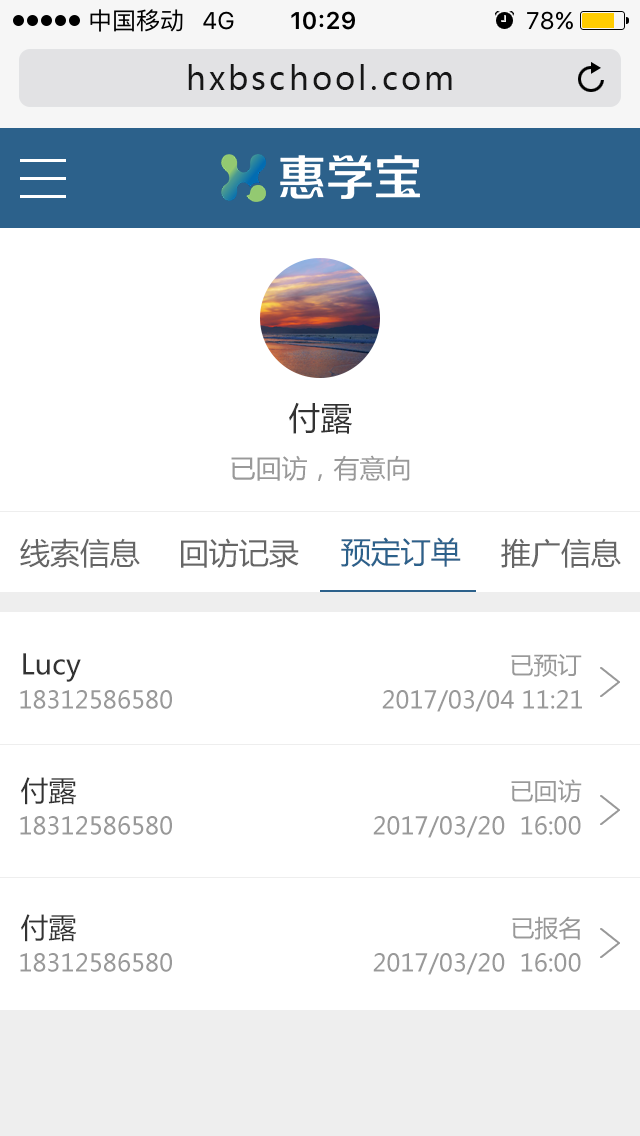
<style>
.page{position:relative;width:640px;height:1136px;background:#ffffff}
.page>*{position:absolute;margin:0}
.t1{font:32px "MicrosoftYaHei";letter-spacing:0.1em;color:#171717}
.t2{font:32px "MicrosoftYaHei";color:#333333}
.t3{font:26px "MicrosoftYaHei";color:#999999}
.t4{font:30px "MicrosoftYaHei";color:#666666}
.t5{font:30px "MicrosoftYaHei";color:#2c618b}
.t6{font:28px "MicrosoftYaHei";color:#333333}
.t7{font:24px "MicrosoftYaHei";color:#999999}
</style>
<div class="page">
<p class="t1" style="left:188px;top:64px;width:264px;height:26px">hxbschool.com</p>
<p class="t2" style="left:289px;top:402px;width:63px;height:32px">付露</p>
<p class="t3" style="left:231px;top:455px;width:179px;height:27px">已回访，有意向</p>
<p class="t4" style="left:20px;top:538px;width:120px;height:30px">线索信息</p>
<p class="t4" style="left:181px;top:538px;width:118px;height:30px">回访记录</p>
<p class="t5" style="left:341px;top:537px;width:120px;height:30px">预定订单</p>
<p class="t4" style="left:501px;top:538px;width:120px;height:30px">推广信息</p>
<p class="t6" style="left:23px;top:653px;width:58px;height:29px">Lucy</p>
<p class="t7" style="left:511px;top:654px;width:71px;height:23px">已预订</p>
<p class="t7" style="left:20px;top:690px;width:152px;height:19px">18312586580</p>
<p class="t7" style="left:382px;top:690px;width:200px;height:22px">2017/03/04 11:21</p>
<p class="t6" style="left:21px;top:777px;width:56px;height:28px">付露</p>
<p class="t7" style="left:511px;top:779px;width:71px;height:24px">已回访</p>
<p class="t7" style="left:20px;top:816px;width:152px;height:19px">18312586580</p>
<p class="t7" style="left:373px;top:816px;width:208px;height:22px">2017/03/20  16:00</p>
<p class="t6" style="left:21px;top:914px;width:56px;height:28px">付露</p>
<p class="t7" style="left:512px;top:916px;width:68px;height:24px">已报名</p>
<p class="t7" style="left:20px;top:953px;width:152px;height:19px">18312586580</p>
<p class="t7" style="left:373px;top:953px;width:208px;height:22px">2017/03/20  16:00</p>
</div>
